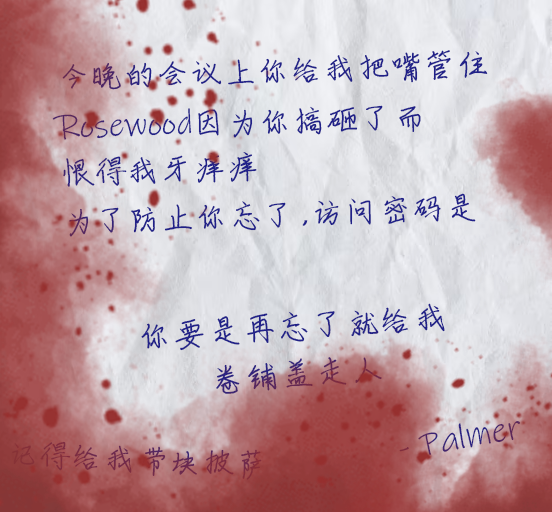
<style>
.page{position:relative;width:552px;height:512px}
.page>*{position:absolute;margin:0}
.t1{font:33.4px/47.5px "ShouShuti";color:#212189}
.t2{font:33.4px/47.5px "InkFree";color:#212189}
.t3{font:33.4px "ShouShuti";color:#212189}
.t4{font:33.4px "FZYBXSFW--GB1-0";letter-spacing:-0.56em;color:#212189;font-weight:bold}
.t5{font:34.7px/46.7px "ShouShuti";color:#212189}
.t6{font:35.4px "InkFree"}
.t7{font:32.7px "ShouShuti";color:#772b46}
</style>
<div class="page">
<p class="t1" style="left:52px;top:50px;width:436px;height:187px;rotate:-2deg">今晚的会议上你给我把嘴管住<br><span class="t2">Rosewood</span>因为你搞砸了而<br>恨得我牙痒痒<br><span class="t3">为了防止你忘了</span><span class="t4">，</span><span class="t3">访问密码是</span></p>
<p class="t5" style="left:141px;top:303px;width:304px;height:91px;text-align:center;rotate:-4deg">你要是再忘了就给我<br>卷铺盖走人</p>
<p class="t6" style="left:399px;top:421px;width:121px;height:34px;rotate:-10deg">- Palmer</p>
<p class="t7" style="left:12px;top:441px;width:250px;height:39px;rotate:2deg">记得给我带块披萨</p>
</div>
